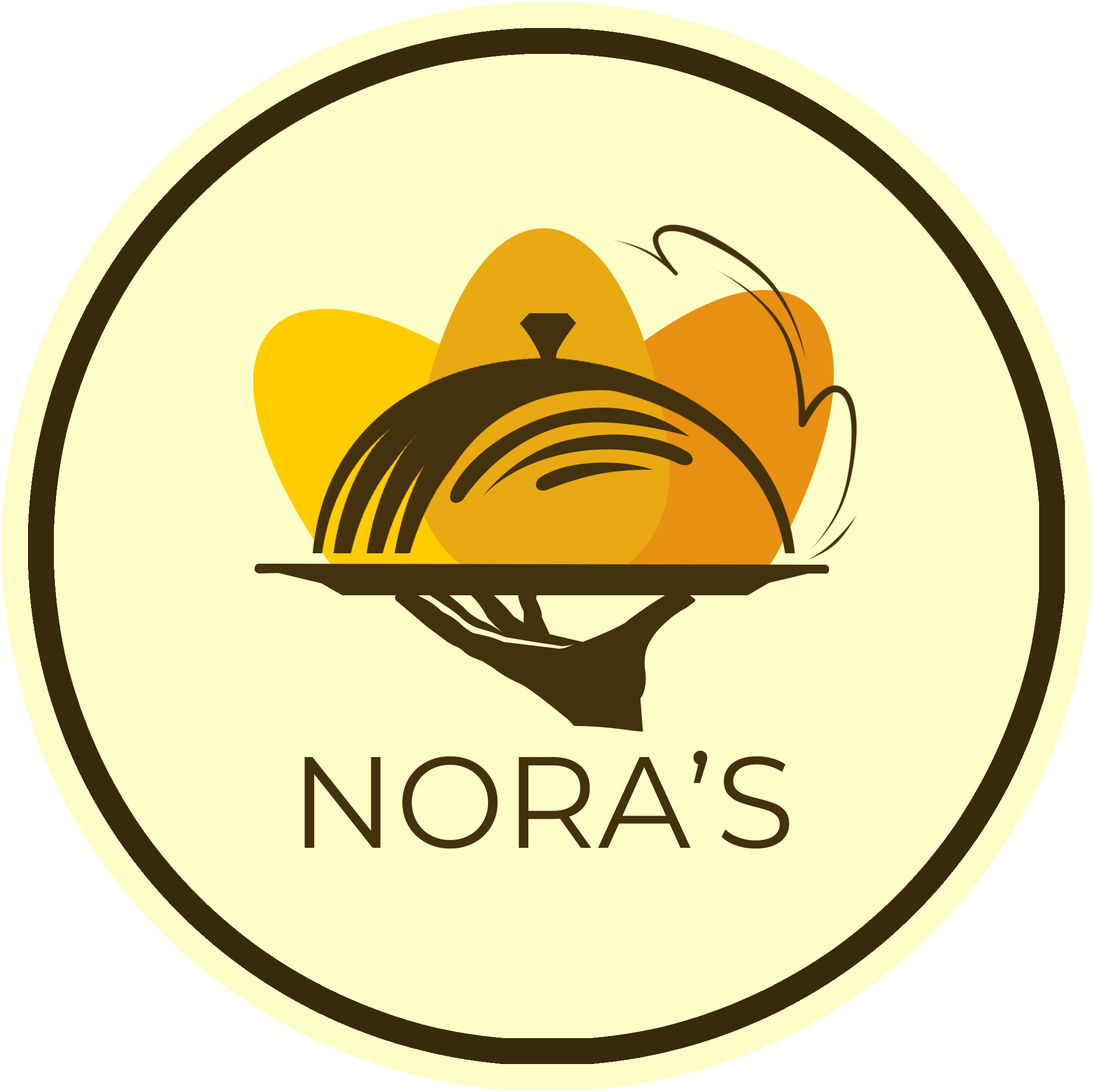
<style>
.page{position:relative;width:1093px;height:1091px;background:#fdfec7}
.page>*{position:absolute;margin:0}
.t1{font:129.6px "Montserrat-Regular";color:#44310d}
</style>
<div class="page">
<p class="t1" style="left:304px;top:750px;width:485px;height:99px">NORA’S</p>
</div>
